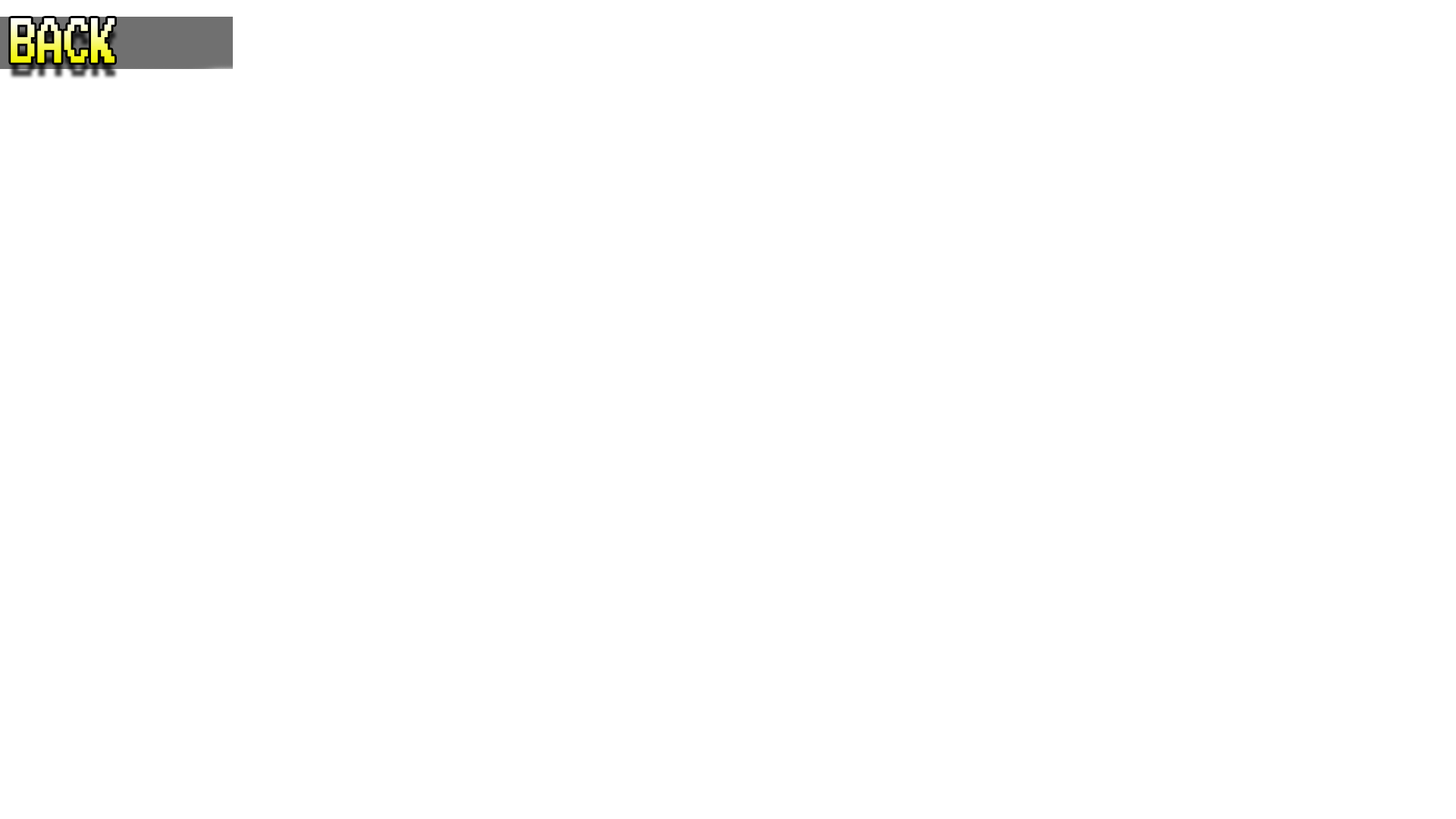
<style>
.page{position:relative;width:1456px;height:819px;background:#ffffff}
.page>*{position:absolute;margin:0}
.t1{font:64.9px "PixelEmulator";scale:0.53 1}
</style>
<div class="page">
<p class="t1" style="left:11px;top:18px;width:104px;height:45px">BACK</p>
</div>
